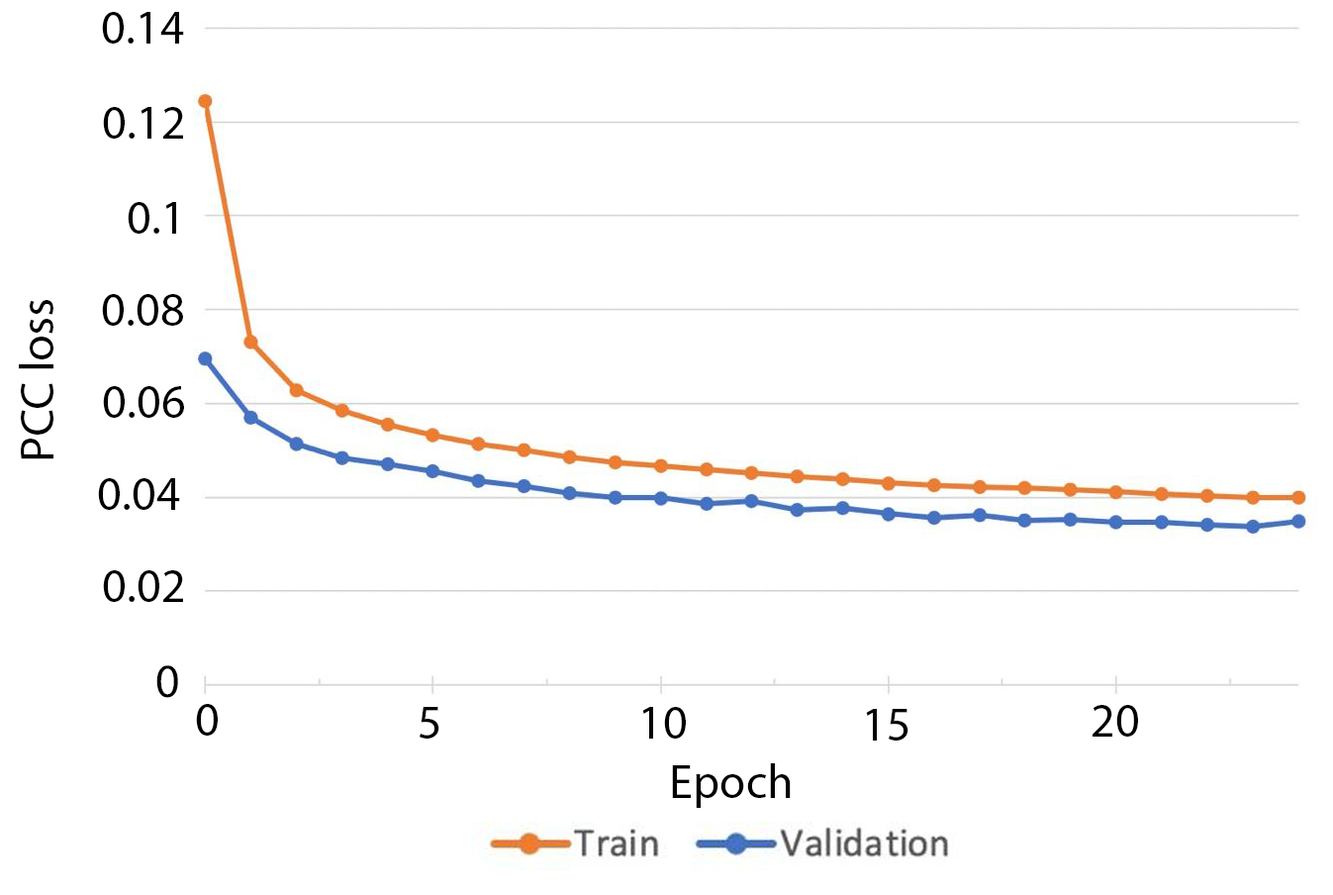
<style>
.page{position:relative;width:1333px;height:895px;background:#ffffff}
.page>*{position:absolute;margin:0}
.t1{font:47.5px "MyriadPro-Regular";color:#000000}
</style>
<div class="page">
<p class="t1" style="left:102px;top:12px;width:82px;height:32px">0.14</p>
<p class="t1" style="left:103px;top:107px;width:80px;height:32px">0.12<br>.</p>
<p class="t1" style="left:128px;top:202px;width:48px;height:32px">0.1<br>.</p>
<p class="t1" style="left:102px;top:294px;width:81px;height:32px">0.08<br>.</p>
<p class="t1" style="left:19px;top:300px;width:34px;height:159px;rotate:-90deg">PCC loss</p>
<p class="t1" style="left:103px;top:386px;width:81px;height:32px">0.06<br>.</p>
<p class="t1" style="left:98px;top:478px;width:82px;height:32px">0.04<br>.0</p>
<p class="t1" style="left:103px;top:570px;width:80px;height:32px">0.02</p>
<p class="t1" style="left:156px;top:665px;width:22px;height:33px">0</p>
<p class="t1" style="left:196px;top:704px;width:22px;height:31px">0</p>
<p class="t1" style="left:420px;top:707px;width:19px;height:31px">5</p>
<p class="t1" style="left:642px;top:707px;width:44px;height:31px">10</p>
<p class="t1" style="left:866px;top:709px;width:42px;height:31px">15</p>
<p class="t1" style="left:1092px;top:705px;width:46px;height:31px">20</p>
<p class="t1" style="left:672px;top:763px;width:119px;height:44px">Epoch</p>
</div>
